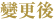
<style>
.page{position:relative;width:54px;height:19px;background:#ffffff}
.page>*{position:absolute;margin:0}
.t1{font:18px "RyuminPr6N-ExBold";color:#af9441}
</style>
<div class="page">
<p class="t1" style="left:0px;top:1px;width:54px;height:18px">變更後</p>
</div>
